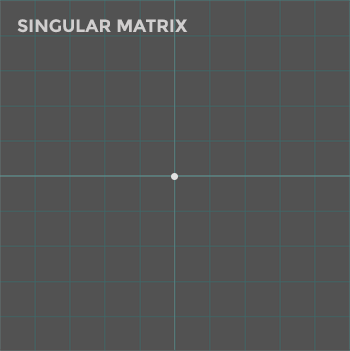
<style>
.page{position:relative;width:350px;height:351px;background:#525252}
.page>*{position:absolute;margin:0}
.t1{font:17.8px "Montserrat-Bold";color:#d1cfcf}
</style>
<div class="page">
<p class="t1" style="left:17px;top:19px;width:171px;height:14px">SINGULAR MATRIX</p>
</div>
